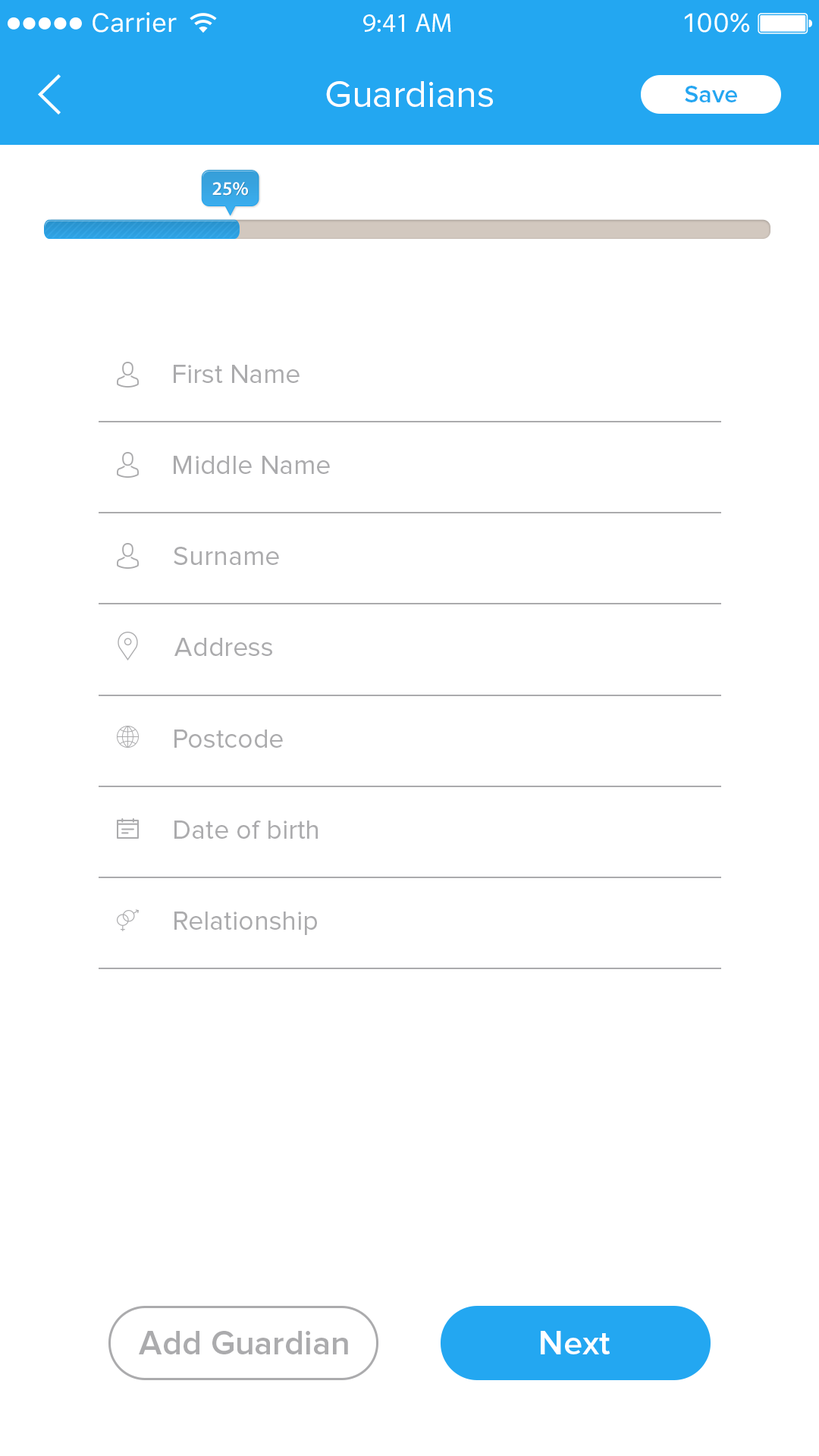
<style>
.page{position:relative;width:819px;height:1456px;background:#ffffff}
.page>*{position:absolute;margin:0}
.t1{font:38.1px "ProximaNova-Regular";color:#ffffff}
.t2{font:24.7px "ProximaNova-Semibold";color:#23a7f1}
.t3{font:19.2px "MyriadPro-Semibold";color:#ffffff}
.t4{font:27.3px "ProximaNova-Regular";color:#ababad}
.t5{font:34.1px "ProximaNova-Semibold";color:#ababad}
.t6{font:34.1px "ProximaNova-Semibold";color:#ffffff}
</style>
<div class="page">
<p class="t1" style="left:326px;top:81px;width:167px;height:26px">Guardians</p>
<p class="t2" style="left:685px;top:86px;width:52px;height:16px">Save</p>
<p class="t3" style="left:212px;top:182px;width:36px;height:14px">25%</p>
<p class="t4" style="left:174px;top:365px;width:126px;height:18px">First Name</p>
<p class="t4" style="left:174px;top:456px;width:156px;height:18px">Middle Name</p>
<p class="t4" style="left:174px;top:547px;width:105px;height:18px">Surname</p>
<p class="t4" style="left:174px;top:638px;width:98px;height:18px">Address</p>
<p class="t4" style="left:174px;top:730px;width:109px;height:18px">Postcode</p>
<p class="t4" style="left:174px;top:821px;width:144px;height:18px">Date of birth</p>
<p class="t4" style="left:174px;top:912px;width:143px;height:23px">Relationship</p>
<p class="t5" style="left:139px;top:1331px;width:209px;height:23px">Add Guardian</p>
<p class="t6" style="left:541px;top:1331px;width:69px;height:23px">Next</p>
</div>
